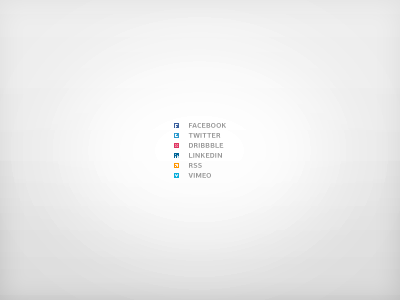
<style>
.page{position:relative;width:400px;height:300px}
.page>*{position:absolute;margin:0}
.t1{font:7px/10px "PFAgoraSansPro-Bold";color:#999999;text-transform:uppercase}
</style>
<div class="page">
<p class="t1" style="left:188px;top:123px;width:38px;height:55px">Facebook<br>twitter<br>dribbble<br>linkedin<br>rss<br>vimeo</p>
</div>
